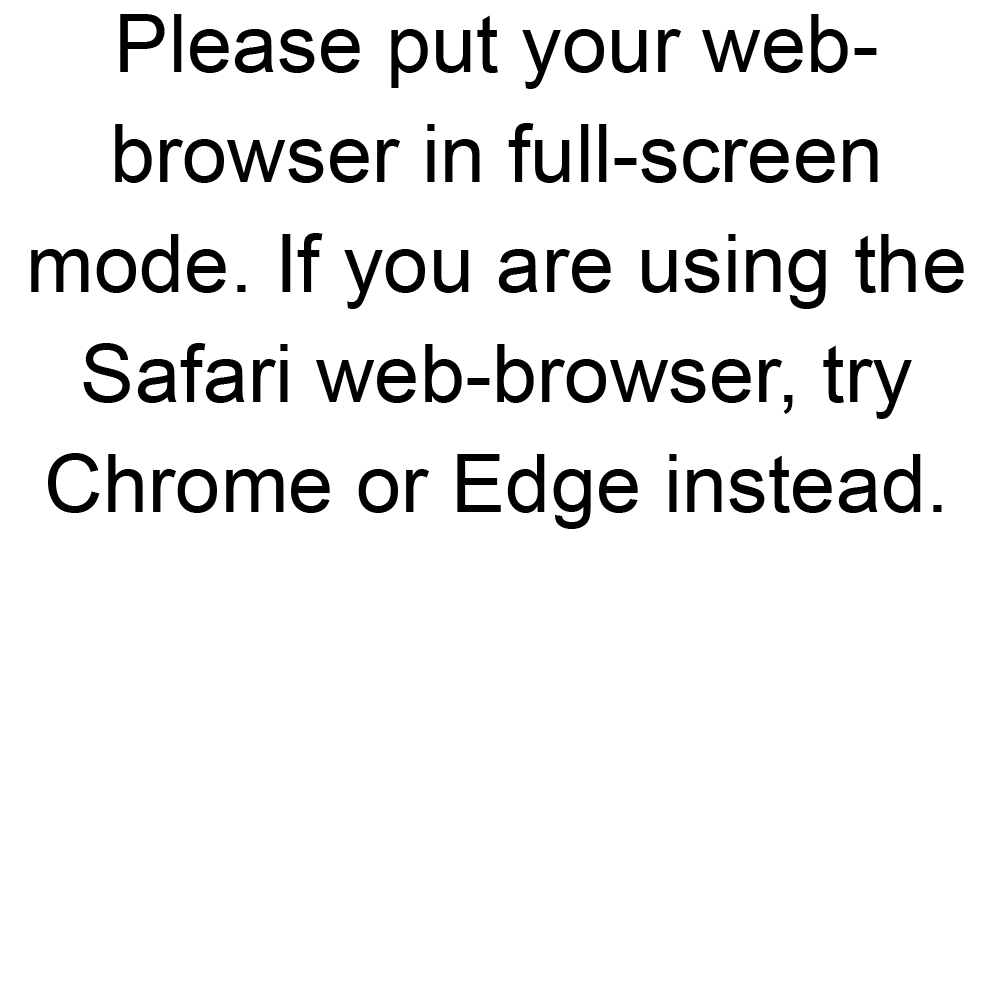
<style>
.page{position:relative;width:1000px;height:1000px;background:#ffffff}
.page>*{position:absolute;margin:0}
.t1{font:80px/110px "ArialMT";color:#000000}
</style>
<div class="page">
<p class="t1" style="left:31px;top:14px;width:933px;height:515px;text-align:center">Please put your web- browser in full-screen mode. If you are using the Safari web-browser, try Chrome or Edge instead.</p>
</div>
